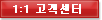
<style>
.page{position:relative;width:102px;height:20px}
.page>*{position:absolute;margin:0}
.t1{font:11px "Dotum";color:#ffffff;font-weight:bold}
</style>
<div class="page">
<p class="t1" style="left:13px;top:4px;width:68px;height:10px">1:1 고객센터</p>
</div>
